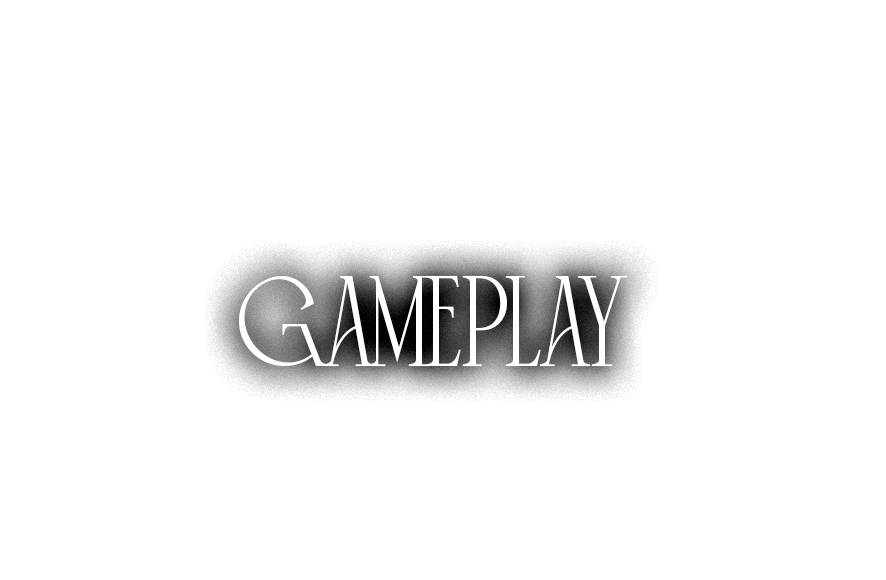
<style>
.page{position:relative;width:886px;height:580px;background:#ffffff}
.page>*{position:absolute;margin:0}
.t1{font:125px "Cyrano-DEMO";color:#ffffff}
</style>
<div class="page">
<p class="t1" style="left:238px;top:275px;width:390px;height:92px">gameplay</p>
</div>
